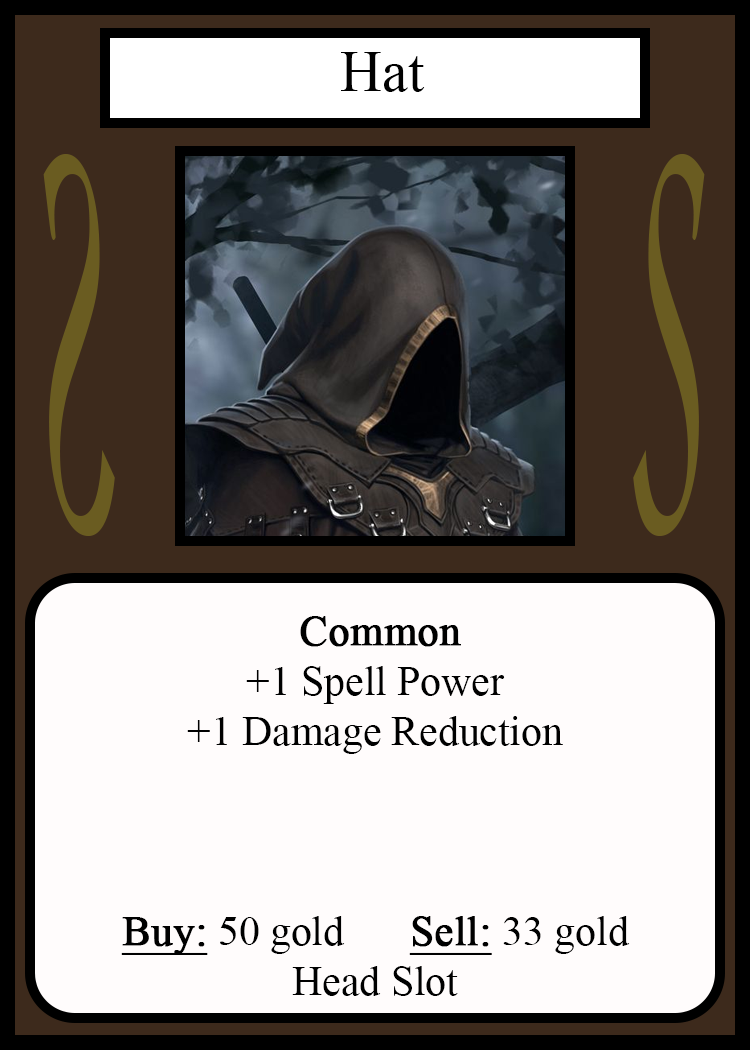
<style>
.page{position:relative;width:750px;height:1050px;background:#fffcfc}
.page>*{position:absolute;margin:0}
.t1{font:58.3px "TimesNewRomanPSMT";color:#010101}
.t2{font:548.5px "Apple-Chancery";color:#6a5c21;scale:0.27 1}
.t3{font:548.2px "Apple-Chancery";color:#6a5c21;scale:0.27 1}
.t4{font:41.7px "TimesNewRomanPSMT";color:#000000}
.t5{font:41.7px "TimesNewRomanPSMT";color:#000000;font-weight:bold}
.t6{font:41.7px "TimesNewRomanPSMT";color:#000000;font-weight:bold;text-decoration:underline}
</style>
<div class="page">
<p class="t1" style="left:341px;top:52px;width:84px;height:40px">Hat</p>
<p class="t2" style="left:43px;top:154px;width:72px;height:382px;rotate:180deg">S</p>
<p class="t3" style="left:633px;top:154px;width:72px;height:382px">S</p>
<p class="t4" style="left:121px;top:616px;width:509px;height:380px;text-align:center"><span class="t5">Common</span><br>+1 Spell Power<br>+1 Damage Reduction<br><br><br><br><span class="t6">Buy:</span> 50 gold   <span class="t6">Sell:</span> 33 gold<br>Head Slot</p>
</div>
